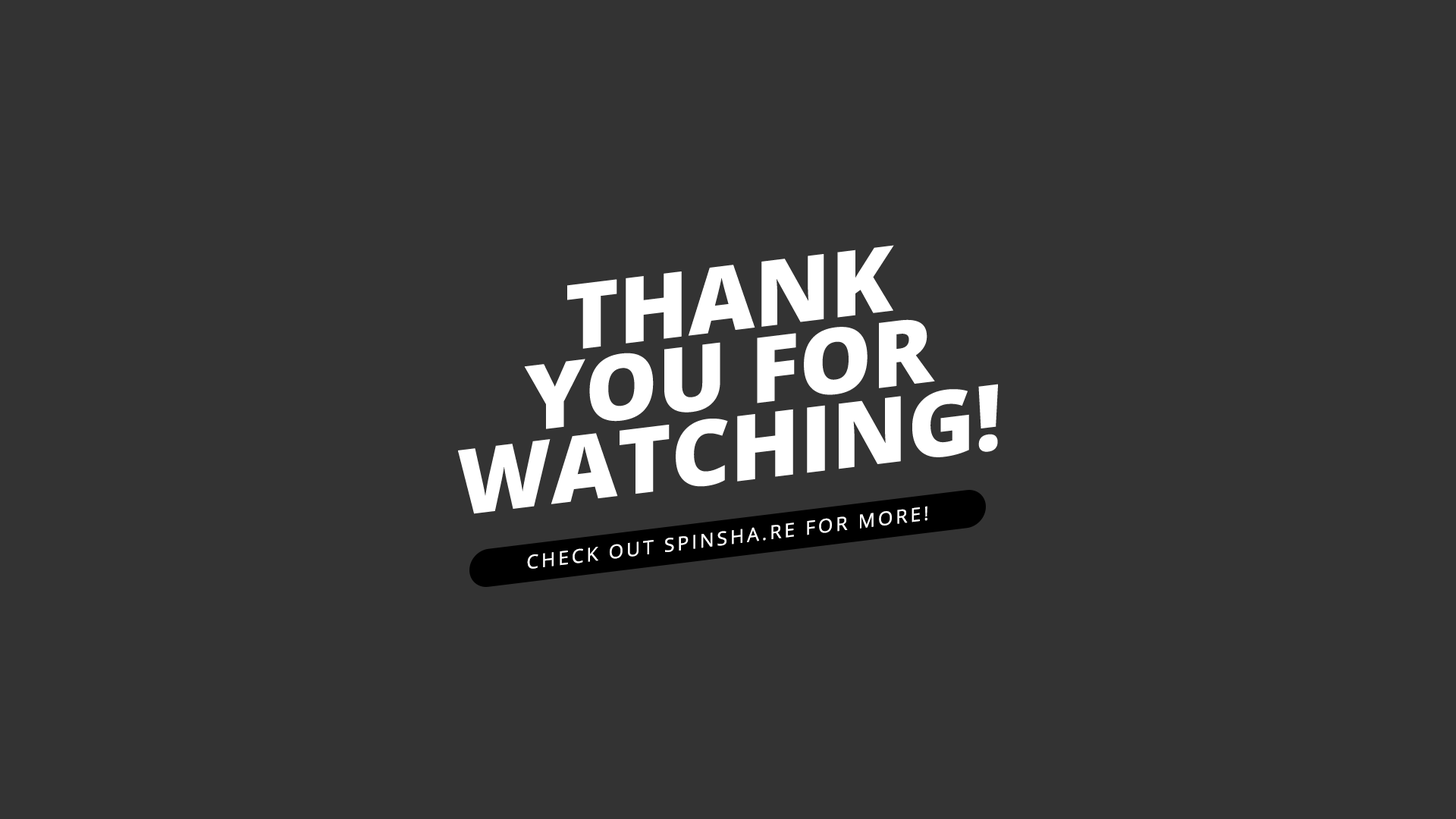
<style>
.page{position:relative;width:1456px;height:819px;background:#333333}
.page>*{position:absolute;margin:0}
.t1{font:91px/75.8px "OpenSans-Extrabold";color:#ffffff}
.t2{font:19px "OpenSans";letter-spacing:0.15em;color:#ffffff}
</style>
<div class="page">
<p class="t1" style="left:458px;top:245px;width:540px;height:269px;text-align:center;rotate:-7deg">THANK<br>YOU FOR<br>WATCHING!</p>
<p class="t2" style="left:527px;top:506px;width:400px;height:63px;rotate:-7deg">CHECK OUT SPINSHA.RE FOR MORE!</p>
</div>
